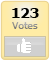
<style>
.page{position:relative;width:50px;height:61px}
.page>*{position:absolute;margin:0}
.t1{font:14px "Tahoma-Bold";color:#000000;scale:1.04 1}
.t2{font:10px "Tahoma";scale:1.04 1}
</style>
<div class="page">
<p class="t1" style="left:12px;top:8px;width:27px;height:10px">123</p>
<p class="t2" style="left:12px;top:22px;width:26px;height:7px">Votes</p>
</div>
